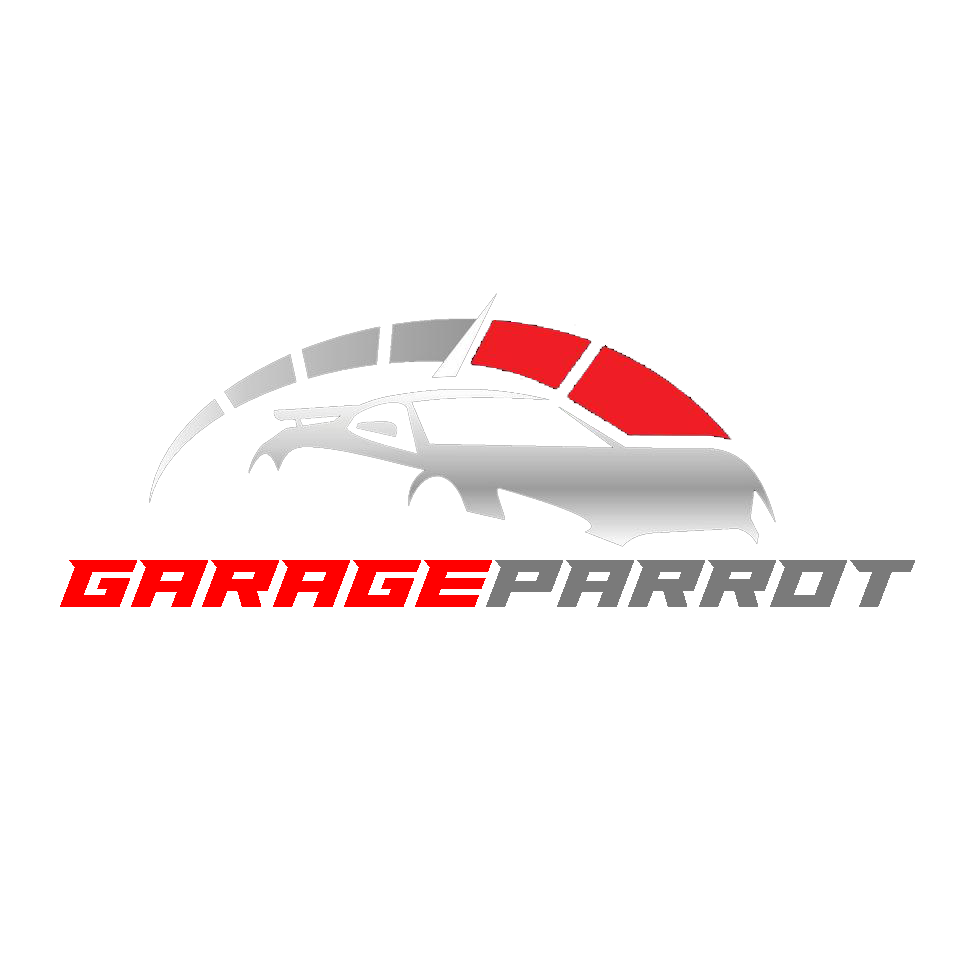
<style>
.page{position:relative;width:980px;height:980px;background:#ffffff}
.page>*{position:absolute;margin:0}
.t1{font:72px "Paladins";color:#ff0000}
.t2{font:72px "Paladins";color:#7a7a7a}
</style>
<div class="page">
<p class="t1" style="left:60px;top:560px;width:855px;height:47px">GARAGE<span class="t2">PARROT</span></p>
</div>
